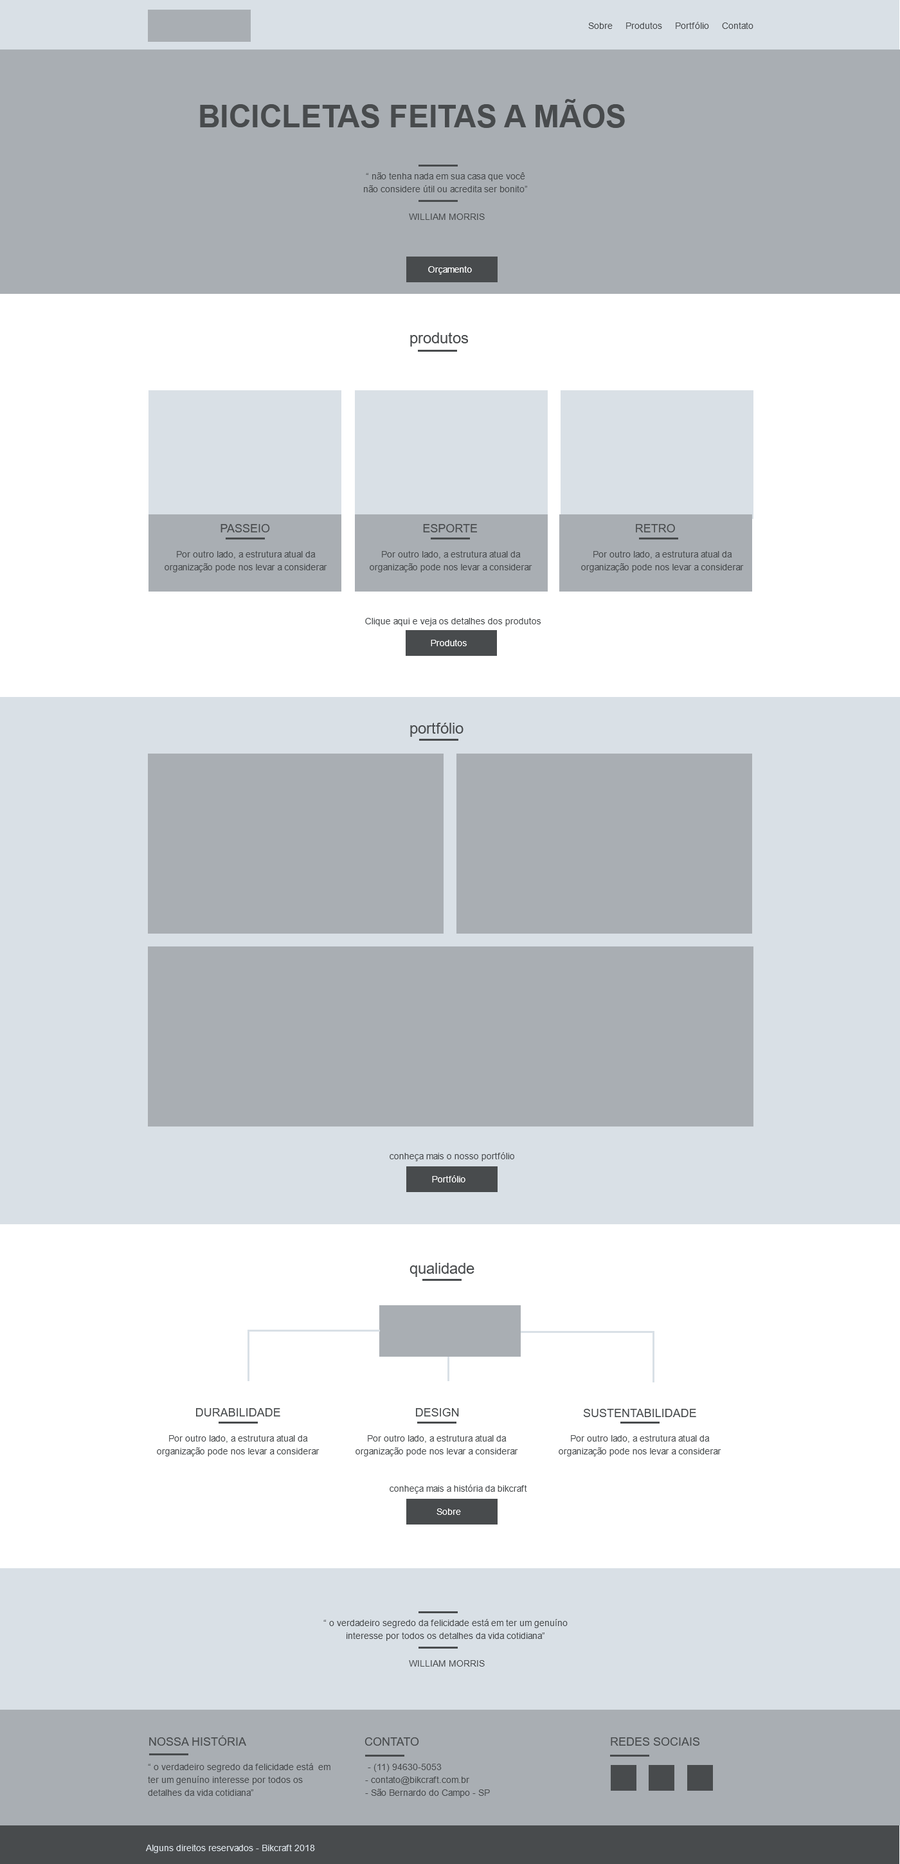
<style>
.page{position:relative;width:900px;height:1864px;background:#ffffff}
.page>*{position:absolute;margin:0}
.t1{font:9px "ArialMT";color:#484b4d}
.t2{font:30.9px "Arial-BoldMT";color:#484b4d;text-transform:uppercase}
.t3{font:9px/12.9px "ArialMT";color:#484b4d}
.t4{font:9px "ArialMT";color:#ffffff}
.t5{font:15.4px "ArialMT";color:#484b4d}
.t6{font:11.6px "ArialMT";color:#484b4d;text-transform:uppercase}
.t7{font:9px/12.9px "ArialMT";color:#484b4d;text-transform:uppercase}
.t8{font:9px "ArialMT";color:#d9e0e6}
.t9{font:9px "ArialMT";color:#d9e0e6;text-transform:uppercase}
</style>
<div class="page">
<p class="t1" style="left:588px;top:22px;width:165px;height:7px">Sobre     Produtos     Portfólio     Contato</p>
<p class="t2" style="left:200px;top:99px;width:425px;height:29px">Bicicletas feitas a mãoS</p>
<p class="t3" style="left:364px;top:172px;width:163px;height:20px;text-align:center">“ não tenha nada em sua casa que você<br>não considere útil ou acredita ser bonito”</p>
<p class="t1" style="left:409px;top:213px;width:76px;height:7px">WILLIAM MORRIS</p>
<p class="t4" style="left:428px;top:266px;width:44px;height:8px">Orçamento</p>
<p class="t5" style="left:410px;top:332px;width:58px;height:14px">produtos</p>
<p class="t6" style="left:221px;top:524px;width:49px;height:8px">Passeio</p>
<p class="t6" style="left:423px;top:524px;width:54px;height:8px">ESPORTE</p>
<p class="t6" style="left:636px;top:524px;width:39px;height:8px">RETRO</p>
<p class="t3" style="left:165px;top:551px;width:162px;height:21px;text-align:center">Por outro lado, a estrutura atual da organização pode nos levar a considerar <span class="t7">.</span></p>
<p class="t3" style="left:370px;top:551px;width:162px;height:21px;text-align:center">Por outro lado, a estrutura atual da organização pode nos levar a considerar <span class="t7">.</span></p>
<p class="t3" style="left:581px;top:551px;width:163px;height:21px;text-align:center">Por outro lado, a estrutura atual da organização pode nos levar a considerar <span class="t7">.</span></p>
<p class="t1" style="left:365px;top:618px;width:176px;height:8px">Clique aqui e veja os detalhes dos produtos</p>
<p class="t4" style="left:431px;top:640px;width:36px;height:6px">Produtos</p>
<p class="t5" style="left:410px;top:723px;width:54px;height:14px">portfólio</p>
<p class="t1" style="left:390px;top:1152px;width:124px;height:9px">conheça mais o nosso portfólio</p>
<p class="t4" style="left:432px;top:1175px;width:33px;height:7px">Portfólio</p>
<p class="t5" style="left:410px;top:1263px;width:64px;height:14px">qualidade</p>
<p class="t6" style="left:196px;top:1408px;width:84px;height:8px">DURABILIDADE</p>
<p class="t6" style="left:416px;top:1408px;width:43px;height:8px">DESIGN</p>
<p class="t6" style="left:583px;top:1408px;width:113px;height:9px">SUSTENTABILIDADE</p>
<p class="t3" style="left:157px;top:1435px;width:163px;height:21px;text-align:center">Por outro lado, a estrutura atual da organização pode nos levar a considerar <span class="t7">.</span></p>
<p class="t3" style="left:356px;top:1435px;width:162px;height:21px;text-align:center">Por outro lado, a estrutura atual da organização pode nos levar a considerar <span class="t7">.</span></p>
<p class="t3" style="left:559px;top:1435px;width:162px;height:21px;text-align:center">Por outro lado, a estrutura atual da organização pode nos levar a considerar <span class="t7">.</span></p>
<p class="t1" style="left:390px;top:1484px;width:137px;height:9px">conheça mais a história da bikcraft</p>
<p class="t4" style="left:437px;top:1508px;width:24px;height:7px">Sobre</p>
<p class="t3" style="left:323px;top:1619px;width:245px;height:22px;text-align:center">“ o verdadeiro segredo da felicidade está em ter um genuíno<br>interesse por todos os detalhes da vida cotidiana”</p>
<p class="t1" style="left:409px;top:1660px;width:76px;height:6px">WILLIAM MORRIS</p>
<p class="t6" style="left:149px;top:1735px;width:97px;height:10px">Nossa história</p>
<p class="t6" style="left:364px;top:1737px;width:55px;height:8px">Contato</p>
<p class="t6" style="left:611px;top:1737px;width:88px;height:8px">redes sociais</p>
<p class="t3" style="left:148px;top:1763px;width:182px;height:33px">“ o verdadeiro segredo da felicidade está  em <br>ter um genuíno interesse por todos os <br>detalhes da vida cotidiana”</p>
<p class="t3" style="left:365px;top:1763px;width:125px;height:34px">- (11) 94630-5053<br>- contato@bikcraft.com.br<br>- São Bernardo do Campo - SP</p>
<p class="t8" style="left:146px;top:1844px;width:169px;height:9px"><span class="t9">A</span>lguns direitos reservados - Bikcraft 2018</p>
</div>
